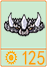
<style>
.page{position:relative;width:47px;height:67px;background:#ccead0}
.page>*{position:absolute;margin:0}
.t1{font:20.2px "SimHei";letter-spacing:0.025em;color:#ff9c00;scale:0.84 1}
.t2{font:20.2px "SimHei";letter-spacing:-0.1em;color:#ff9c00;scale:0.84 1}
</style>
<div class="page">
<p class="t1" style="left:22px;top:50px;width:23px;height:15px"><span class="t2">1</span>25</p>
</div>
